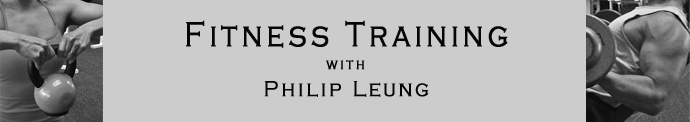
<style>
.page{position:relative;width:690px;height:122px;background:#cccccc}
.page>*{position:absolute;margin:0}
.t1{font:36.1px "CopperplateGothic-Light";color:#050505;font-weight:bold;scale:0.8 1}
.t2{font:15.4px "CopperplateGothic-Light";color:#050505;font-weight:bold;scale:0.82 1}
.t3{font:22.5px "CopperplateGothic-Light";color:#050505;font-weight:bold;scale:0.89 1}
</style>
<div class="page">
<p class="t1" style="left:186px;top:20px;width:322px;height:28px">F i t n e s s  T r a i n i n g</p>
<p class="t2" style="left:326px;top:60px;width:39px;height:10px">w i t h</p>
<p class="t3" style="left:264px;top:81px;width:165px;height:16px">P h i l i p  L e u n g</p>
</div>
